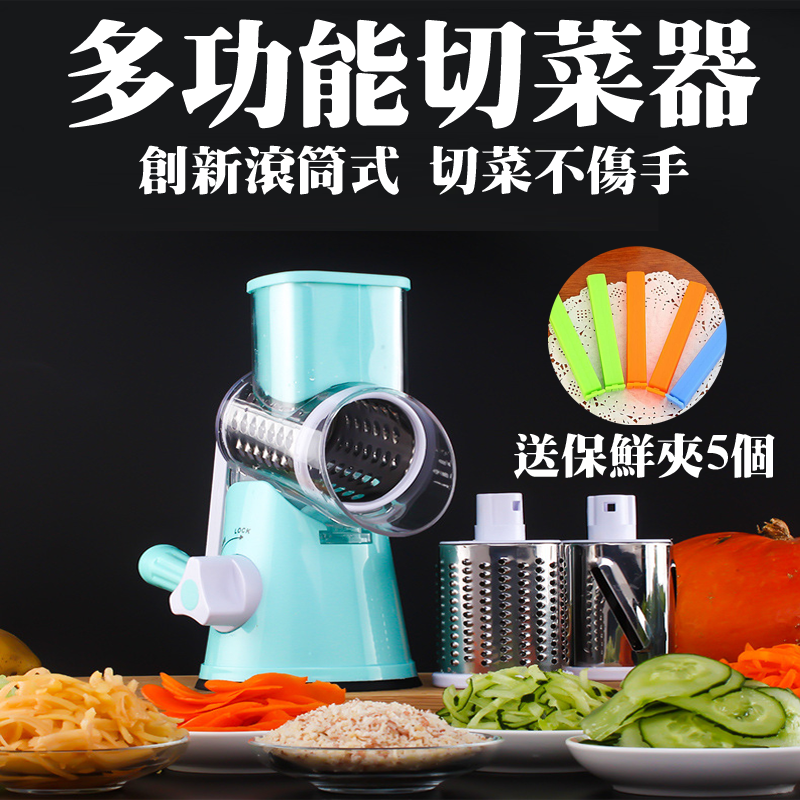
<style>
.page{position:relative;width:800px;height:800px}
.page>*{position:absolute;margin:0}
.t1{font:117.1px "HanWangMingBlack";color:#ffffff}
.t2{font:52.7px "HanWangMingBlack";color:#ffffff}
.t3{font:48px "HanWangMingBlack";color:#ffffff}
</style>
<div class="page">
<p class="t1" style="left:68px;top:19px;width:693px;height:110px">多功能切菜器</p>
<p class="t2" style="left:139px;top:145px;width:550px;height:50px">創新滾筒式 切菜不傷手</p>
<p class="t3" style="left:514px;top:433px;width:261px;height:46px">送保鮮夾5個</p>
</div>
